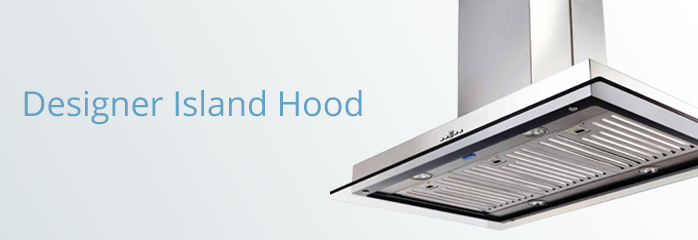
<style>
.page{position:relative;width:698px;height:240px}
.page>*{position:absolute;margin:0}
.t1{font:34.2px "OpenSans";color:#64a2c6}
</style>
<div class="page">
<p class="t1" style="left:24px;top:90px;width:338px;height:35px">Designer Island Hood</p>
</div>
